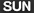
<style>
.page{position:relative;width:34px;height:13px}
.page>*{position:absolute;margin:0}
.t1{font:13.9px "K2D-ExtraBold";color:#ffffff}
</style>
<div class="page">
<p class="t1" style="left:3px;top:1px;width:28px;height:11px">SUN</p>
</div>
